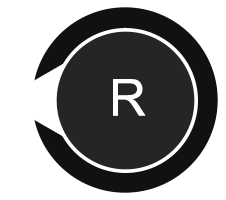
<style>
.page{position:relative;width:226px;height:200px;background:#ffffff}
.page>*{position:absolute;margin:0}
.t1{font:51.1px "ArialMT";color:#ffffff}
</style>
<div class="page">
<p class="t1" style="left:113px;top:79px;width:33px;height:37px">R</p>
</div>
